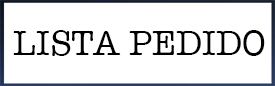
<style>
.page{position:relative;width:275px;height:86px;background:#ffffff}
.page>*{position:absolute;margin:0}
.t1{font:36px "AmericanTypewriter";color:#000000}
</style>
<div class="page">
<p class="t1" style="left:13px;top:30px;width:252px;height:26px">LISTA PEDIDO</p>
</div>
